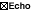
<style>
.page{position:relative;width:33px;height:12px;background:#ffffff}
.page>*{position:absolute;margin:0}
.t1{font:9px "Helvetica-Bold";color:#000000}
</style>
<div class="page">
<p class="t1" style="left:9px;top:2px;width:22px;height:7px">Echo</p>
</div>
